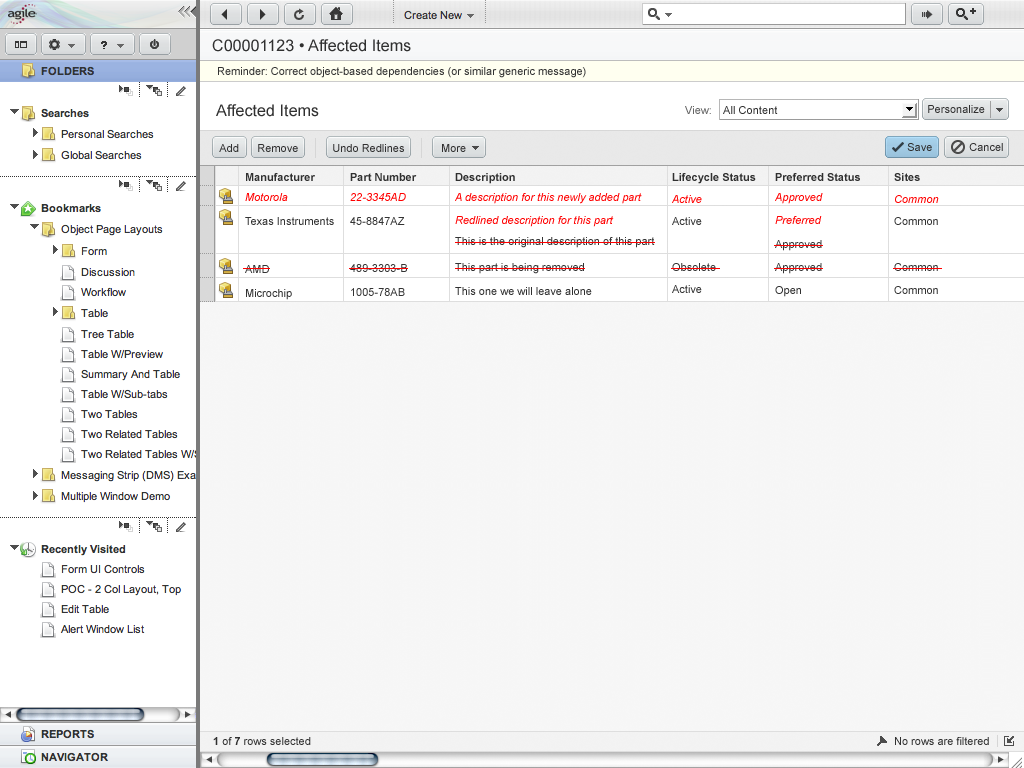
<style>
.page{position:relative;width:1024px;height:768px;background:#f6f6f6}
.page>*{position:absolute;margin:0}
.t1{font:16px "ArialMT";letter-spacing:0.005em;color:#303030}
.t2{font:11px "ArialMT";color:#333333}
.t3{font:11px "ArialMT";letter-spacing:0.005em;color:#666666}
.t4{font:11px "ArialMT";letter-spacing:0.005em;color:#303030}
.t5{font:11px "ArialMT";color:#303030}
.t6{font:11px/24px "ArialMT";color:#333333}
.t7{font:11px/20px "Arial-BoldMT";color:#303030}
.t8{font:11px/20px "Arial-ItalicMT";color:#ff0000}
.t9{font:11px/23px "ArialMT";color:#333333}
.t10{font:11px/21px "ArialMT";color:#333333}
.t11{font:11px/23px "Arial-ItalicMT";color:#ff0000}
.t12{font:11px/26px "ArialMT";color:#333333}
.t13{font:11px/24px "ArialMT";color:#303030}
.t14{font:11px/22px "Arial-ItalicMT";color:#ff0000}
.t15{font:11px/22px "ArialMT";color:#333333}
.t16{font:11px/20px "ArialMT";color:#333333}
.t17{font:11px/23px "ArialMT";color:#303030}
.t18{font:11px "Arial-BoldMT";color:#303030}
</style>
<div class="page">
<p class="t1" style="left:212px;top:39px;width:199px;height:13px">C00001123 • Affected Items</p>
<p class="t2" style="left:218px;top:67px;width:368px;height:11px">Reminder: Correct object-based dependencies (or similar generic message)</p>
<p class="t1" style="left:216px;top:104px;width:103px;height:13px">Affected Items</p>
<p class="t3" style="left:685px;top:106px;width:26px;height:8px">View:</p>
<p class="t4" style="left:723px;top:106px;width:55px;height:8px">All Content</p>
<p class="t5" style="left:928px;top:105px;width:57px;height:8px">Personalize</p>
<p class="t5" style="left:219px;top:144px;width:20px;height:8px">Add</p>
<p class="t5" style="left:258px;top:144px;width:40px;height:8px">Remove</p>
<p class="t5" style="left:333px;top:144px;width:71px;height:8px">Undo Redlines</p>
<p class="t5" style="left:442px;top:144px;width:24px;height:8px">More</p>
<p class="t5" style="left:907px;top:143px;width:25px;height:8px">Save</p>
<p class="t5" style="left:969px;top:143px;width:34px;height:8px">Cancel</p>
<p class="t6" style="left:245px;top:173px;width:89px;height:127px"><span class="t7">Manufacturer<br></span><span class="t8">Motorola<br></span>Texas Instruments <br><br>AMD<br>Microchip</p>
<p class="t7" style="left:350px;top:173px;width:67px;height:123px">Part Number<br><span class="t8">22-3345AD<br></span><span class="t6">45-8847AZ <br><br></span><span class="t9">489-3303-B<br></span><span class="t6">1005-78AB</span></p>
<p class="t10" style="left:455px;top:173px;width:200px;height:122px"><span class="t7">Description<br></span><span class="t8">A description for this newly added part<br></span><span class="t11">Redlined description for this part<br></span>This is the original description of this part <br><span class="t12">This part is being removed<br></span><span class="t13">This one we will leave alone</span></p>
<p class="t7" style="left:672px;top:173px;width:84px;height:120px">Lifecycle Status<br><span class="t14">Active<br></span><span class="t15">Active<br><br></span><span class="t6">Obsolete<br></span><span class="t15">Active</span></p>
<p class="t7" style="left:775px;top:173px;width:85px;height:124px">Preferred Status<br><span class="t8">Approved<br></span><span class="t11">Preferred<br></span><span class="t16">Approved <br></span><span class="t9">Approved<br></span><span class="t17">Open</span></p>
<p class="t14" style="left:894px;top:173px;width:45px;height:121px"><span class="t7">Sites<br></span>Common<br><span class="t15">Common<br><br></span><span class="t6">Common<br></span><span class="t9">Common</span></p>
<p class="t5" style="left:213px;top:737px;width:98px;height:8px"><span class="t18">1</span> of <span class="t18">7</span> rows selected</p>
<p class="t5" style="left:895px;top:737px;width:94px;height:8px">No rows are filtered</p>
</div>
